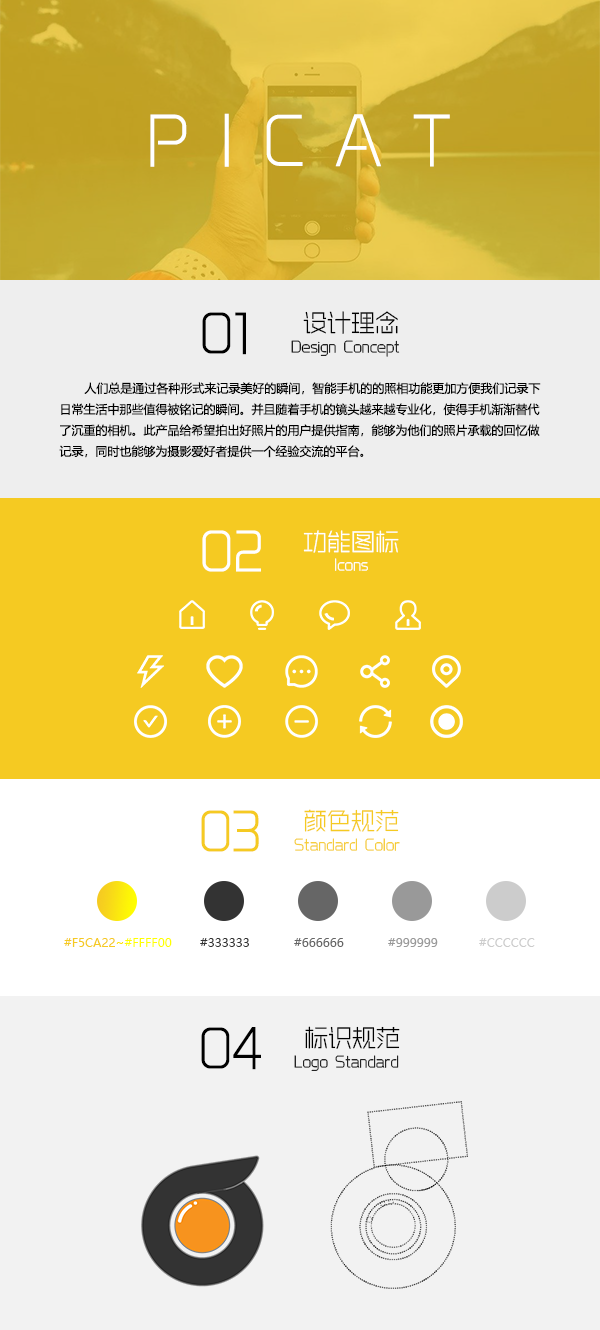
<style>
.page{position:relative;width:600px;height:1330px;background:#f2f2f2}
.page>*{position:absolute;margin:0}
.t1{font:60px "Benmo-Yonghei";color:#ffffff}
.t2{font:48px "Benmo-Yonghei";color:#000000}
.t3{font:24px "Benmo-Yonghei";color:#000000}
.t4{font:14px "Benmo-Yonghei";color:#000000}
.t5{font:12px "MicrosoftYaHei";color:#000000}
.t6{font:48px "Benmo-Yonghei";color:#ffffff}
.t7{font:24px "Benmo-Yonghei";color:#ffffff}
.t8{font:14px "Benmo-Yonghei";color:#ffffff}
.t9{font:24px "Benmo-Yonghei";color:#f5ca22}
.t10{font:48px "Benmo-Yonghei";color:#f5ca22}
.t11{font:14px "Benmo-Yonghei";color:#f5ca22}
.t12{font:12px "MicrosoftYaHei";color:#f5ca22}
.t13{font:12px "MicrosoftYaHei";color:#ffe400}
.t14{font:12px "MicrosoftYaHei";color:#ffff00}
.t15{font:12px "MicrosoftYaHei";color:#333333}
.t16{font:12px "MicrosoftYaHei";color:#666666}
.t17{font:12px "MicrosoftYaHei";color:#999999}
.t18{font:12px "MicrosoftYaHei";color:#cccccc}
.t19{font:14px "Benmo-Yonghei"}
</style>
<div class="page">
<p class="t1" style="left:150px;top:113px;width:300px;height:54px">P I C A T</p>
<p class="t2" style="left:202px;top:312px;width:44px;height:43px">01</p>
<p class="t3" style="left:303px;top:311px;width:95px;height:23px">设计理念</p>
<p class="t4" style="left:291px;top:340px;width:109px;height:17px">Design Concept</p>
<p class="t5" style="left:59px;top:382px;width:482px;height:76px">人们总是通过各种形式来记录美好的瞬间，智能手机的的照相功能更加方便我们记录下<br>日常生活中那些值得被铭记的瞬间。并且随着手机的镜头越来越专业化，使得手机渐渐替代<br>了沉重的相机。此产品给希望拍出好照片的用户提供指南，能够为他们的照片承载的回忆做<br>记录，同时也能够为摄影爱好者提供一个经验交流的平台。</p>
<p class="t6" style="left:202px;top:530px;width:59px;height:42px">02</p>
<p class="t7" style="left:303px;top:530px;width:96px;height:23px">功能图标</p>
<p class="t8" style="left:335px;top:558px;width:33px;height:13px">Icons</p>
<p class="t9" style="left:304px;top:809px;width:95px;height:23px">颜色规范</p>
<p class="t10" style="left:201px;top:810px;width:58px;height:42px">03</p>
<p class="t11" style="left:294px;top:838px;width:106px;height:13px">Standard Color</p>
<p class="t12" style="left:64px;top:938px;width:108px;height:9px">#F5CA22<span class="t13">~</span><span class="t14">#FFFF00</span></p>
<p class="t15" style="left:200px;top:938px;width:49px;height:9px">#333333</p>
<p class="t16" style="left:294px;top:938px;width:50px;height:9px">#666666</p>
<p class="t17" style="left:388px;top:938px;width:50px;height:9px">#999999</p>
<p class="t18" style="left:479px;top:938px;width:56px;height:9px">#CCCCCC</p>
<p class="t2" style="left:201px;top:1027px;width:60px;height:43px">04</p>
<p class="t3" style="left:305px;top:1026px;width:95px;height:23px">标识规范</p>
<p class="t19" style="left:294px;top:1055px;width:105px;height:16px">Logo Standard</p>
</div>
